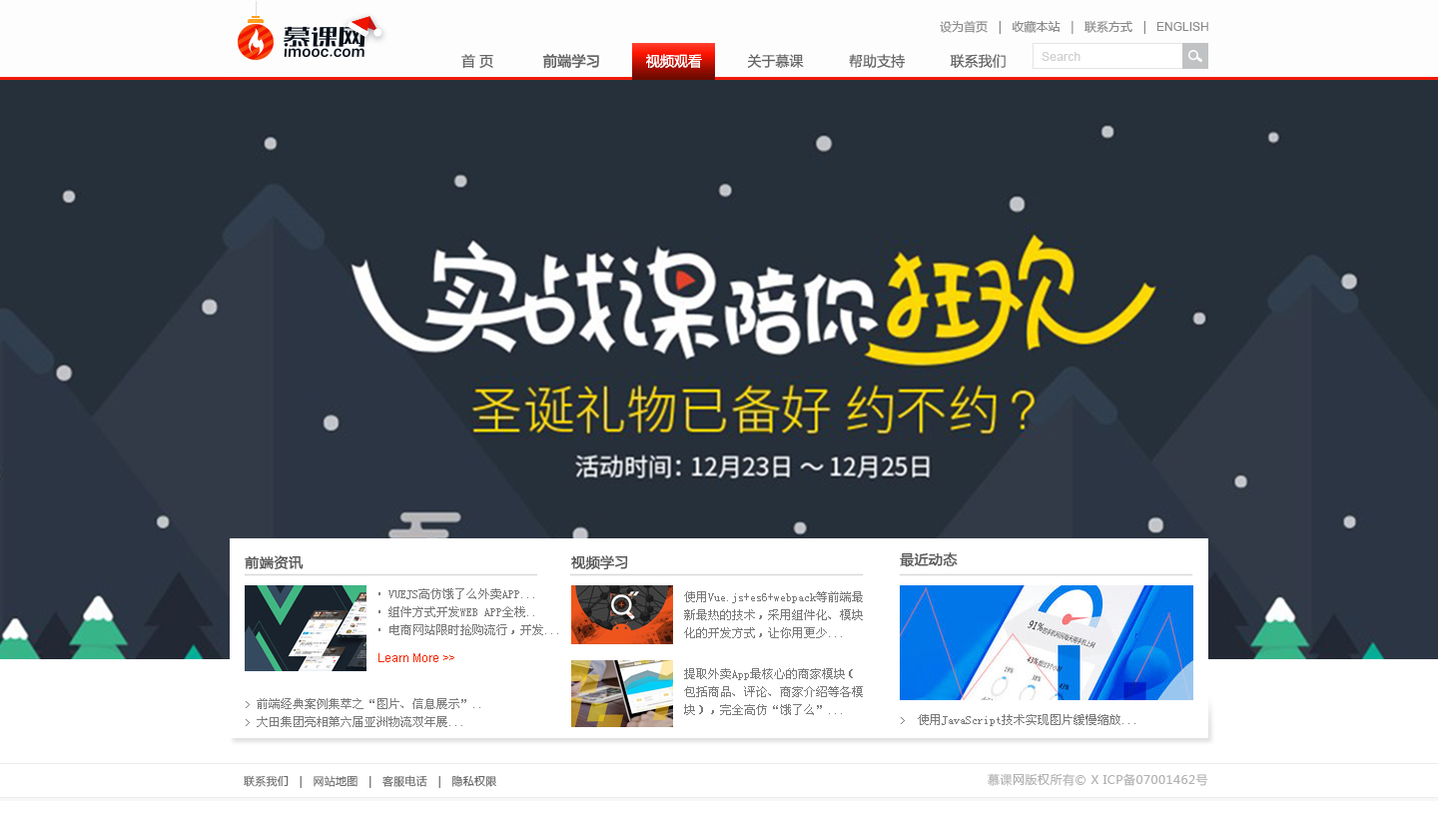
<style>
.page{position:relative;width:1438px;height:829px;background:#26303a}
.page>*{position:absolute;margin:0}
.t1{font:12px "MicrosoftYaHei";color:#898989}
.t2{font:12px "ArialMT";color:#898989}
.t3{font:14px "MicrosoftYaHei";color:#666666}
.t4{font:14px "MicrosoftYaHei";color:#666666;font-weight:bold}
.t5{font:14px "MicrosoftYaHei";color:#ffffff}
.t6{font:12px "ArialMT";letter-spacing:0.02em;color:#cecece}
.t7{font:14px "MicrosoftYaHei";letter-spacing:0.02em;color:#585858;font-weight:bold}
.t8{font:14px "MicrosoftYaHei";color:#585858;font-weight:bold}
.t9{font:12px/18px "SimSun";color:#7a7a7a}
.t10{font:12px "ArialMT";color:#f32a04}
.t11{font:12px/18px "SimSun";color:#7c7c7c}
.t12{font:10px/18px "SimSun";color:#7c7c7c}
.t13{font:12px "SimSun";color:#7a7a7a}
.t14{font:12px "SimSun";color:#002646}
.t15{font:10px "SimSun";color:#7a7a7a}
.t16{font:12px "MicrosoftYaHei";letter-spacing:0.04em;color:#b1b1b1}
.t17{font:11px "MicrosoftYaHei";letter-spacing:0.025em;color:#666666}
</style>
<div class="page">
<p class="t1" style="left:940px;top:20px;width:269px;height:14px">设为首页   |   收藏本站   |   联系方式   |   <span class="t2">ENGLISH</span></p>
<p class="t3" style="left:461px;top:54px;width:545px;height:15px">首 页            <span class="t4">前端学习           </span><span class="t5">视频观看  </span>         关于慕课           帮助支持           联系我们</p>
<p class="t6" style="left:1042px;top:52px;width:39px;height:9px">Search</p>
<p class="t7" style="left:245px;top:555px;width:59px;height:14px">前端资讯</p>
<p class="t8" style="left:571px;top:555px;width:57px;height:15px">视频学习</p>
<p class="t8" style="left:900px;top:552px;width:58px;height:15px">最近动态</p>
<p class="t9" style="left:379px;top:588px;width:179px;height:47px">• VUEJS高仿饿了么外卖APP...<br>• 组件方式开发WEB APP全栈..<br>• 电商网站限时抢购流行，开发...</p>
<p class="t9" style="left:684px;top:591px;width:179px;height:47px">使用Vue.js+es6+webpack等前端最<br>新最热的技术，采用组件化、模块<br>化的开发方式，让你用更少...</p>
<p class="t10" style="left:379px;top:653px;width:75px;height:9px">Learn More&gt;&gt;</p>
<p class="t9" style="left:684px;top:668px;width:179px;height:47px">提取外卖App最核心的商家模块（<br>包括商品、评论、商家介绍等各模<br>块），完全高仿“饿了么”...</p>
<p class="t11" style="left:246px;top:698px;width:234px;height:29px"><span class="t12">&gt;</span> 前端经典案例集萃之“图片、信息展示”..<br><span class="t12">&gt;</span> 大田集团亮相第六届亚洲物流双年展...</p>
<p class="t13" style="left:901px;top:714px;width:235px;height:12px"><span class="t14"><br></span><span class="t15">&gt;</span>  使用JavaScript技术实现图片缓慢缩放...</p>
<p class="t16" style="left:988px;top:773px;width:221px;height:13px">慕课网版权所有© X ICP备07001462号</p>
<p class="t17" style="left:244px;top:775px;width:252px;height:13px">联系我们   |   网站地图   |   客服电话   |   隐私权限</p>
</div>
